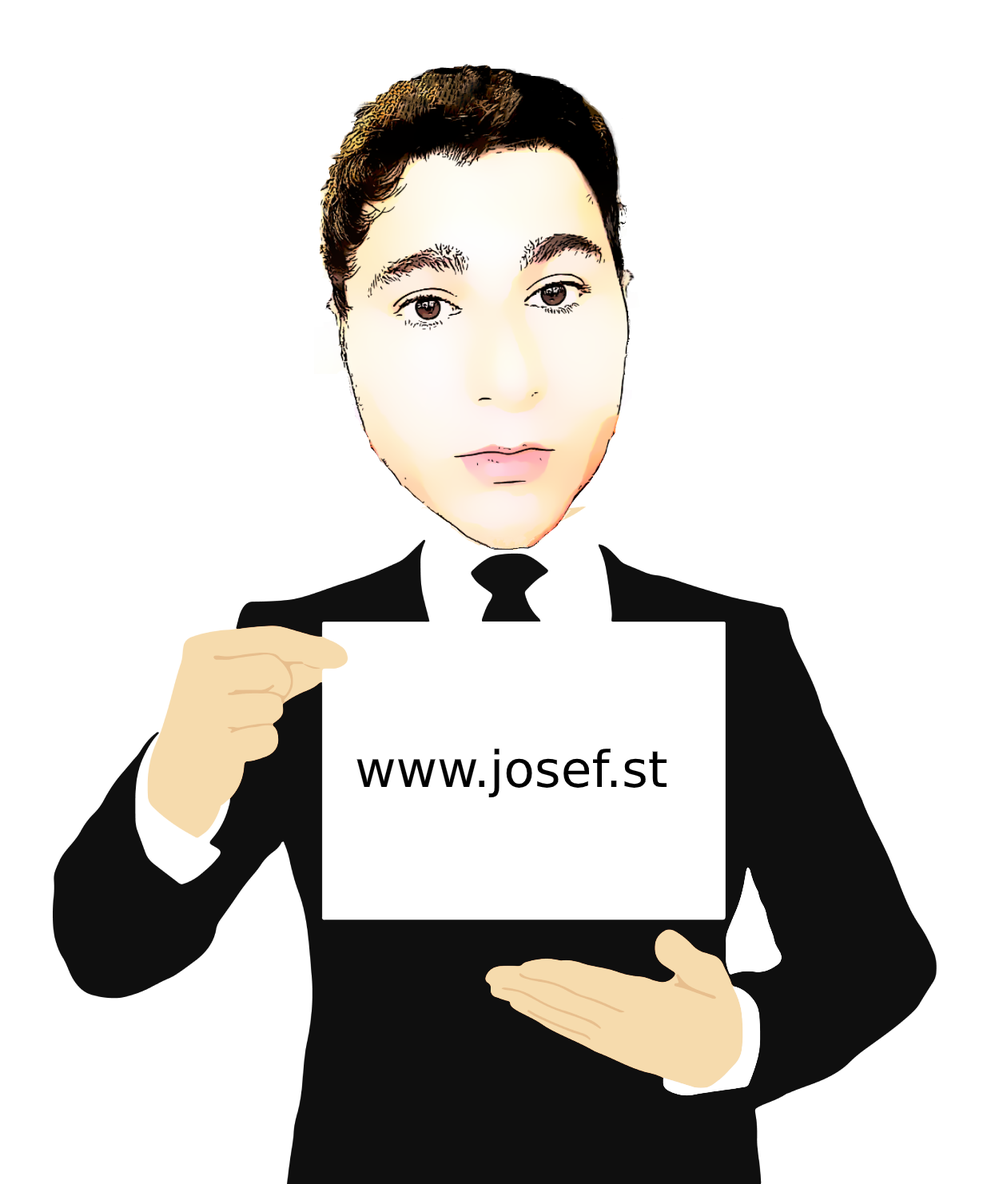
<style>
.page{position:relative;width:1007px;height:1184px;background:#ffffff}
.page>*{position:absolute;margin:0}
.t1{font:50.3px "DejaVuSans";color:#000000}
</style>
<div class="page">
<p class="t1" style="left:356px;top:749px;width:311px;height:49px">www.josef.st</p>
</div>
